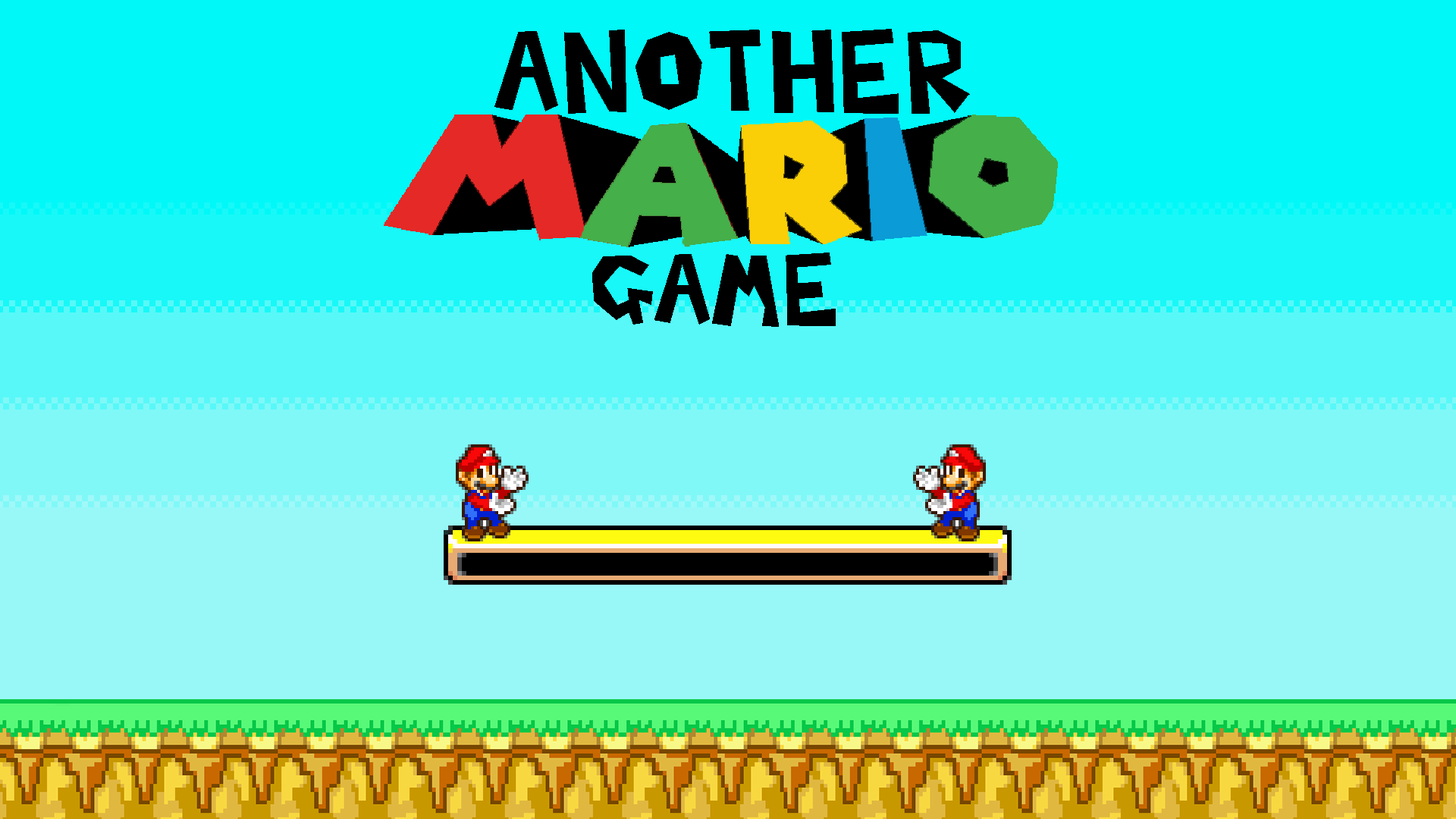
<style>
.page{position:relative;width:1456px;height:819px}
.page>*{position:absolute;margin:0}
.t1{font:98px "MarioLuigiTwo";color:#000000}
.t2{font:85.4px "MarioLuigiTwo";color:#000000}
</style>
<div class="page">
<p class="t1" style="left:494px;top:29px;width:476px;height:85px">ANOTHER</p>
<p class="t2" style="left:592px;top:253px;width:244px;height:74px">GAME</p>
</div>
